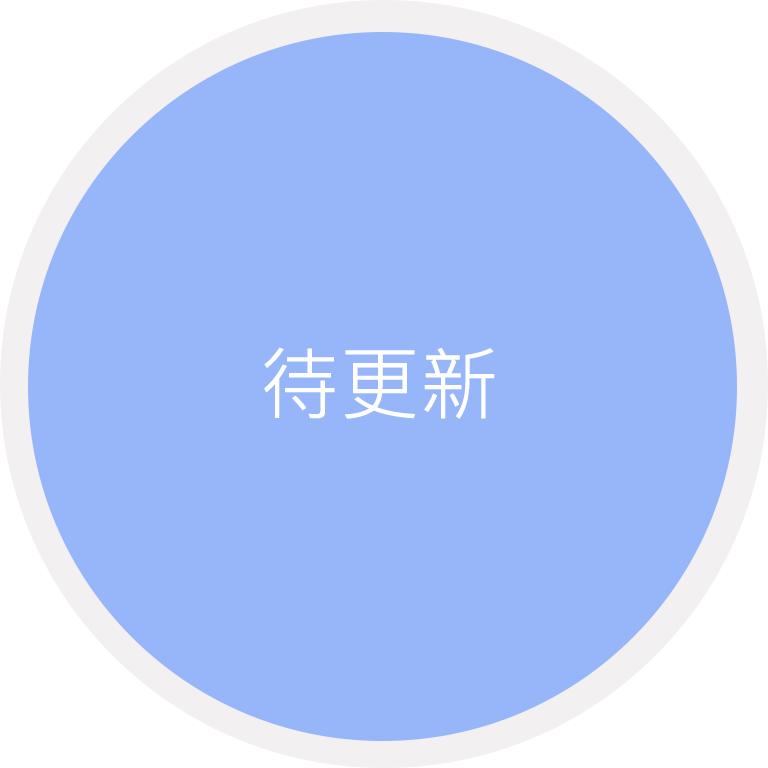
<style>
.page{position:relative;width:768px;height:768px;background:#96b6f9}
.page>*{position:absolute;margin:0}
.t1{font:80px "MicrosoftJhengHeiRegular";color:#ffffff}
</style>
<div class="page">
<p class="t1" style="left:264px;top:347px;width:231px;height:72px">待更新</p>
</div>
